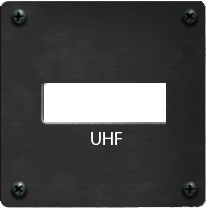
<style>
.page{position:relative;width:208px;height:209px}
.page>*{position:absolute;margin:0}
.t1{font:18.7px "MyriadPro-Regular";color:#ffffff}
</style>
<div class="page">
<p class="t1" style="left:91px;top:132px;width:31px;height:13px">UHF</p>
</div>
